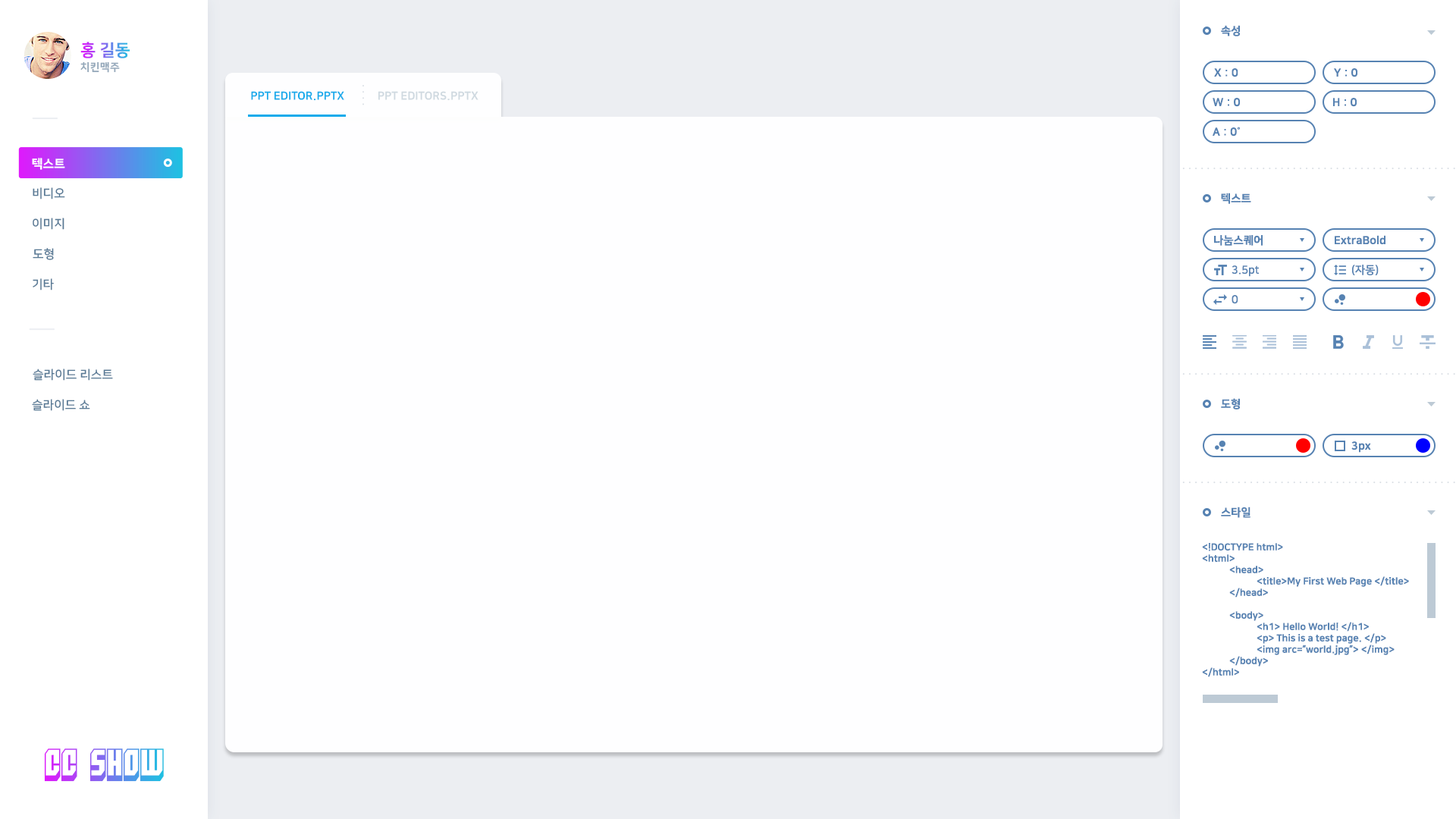
<style>
.page{position:relative;width:1456px;height:819px;background:#fefeff}
.page>*{position:absolute;margin:0}
.t1{font:11.1px "NanumSquareEB";color:#5682b2}
.t2{font:16.7px "NanumSquareEB";text-transform:uppercase}
.t3{font:10.6px "NanumSquareEB";letter-spacing:0.025em;color:#94a8ba;text-transform:uppercase}
.t4{font:11.1px "NanumSquareEB";color:#12aaeb;text-transform:uppercase}
.t5{font:11.1px "NanumSquareEB";color:#cfd9e0;text-transform:uppercase}
.t6{font:12.1px "NanumSquareEB";color:#ffffff;text-transform:uppercase}
.t7{font:12.1px "NanumSquareB";color:#597a96;text-transform:uppercase}
.t8{font:11.1px "NanumSquareB";color:#5682b2}
.t9{font:9.5px "NanumSquareEB";color:#5682b2}
.t10{font:31.6px "Blockt"}
</style>
<div class="page">
<p class="t1" style="left:1221px;top:25px;width:19px;height:11px">속성</p>
<p class="t2" style="left:80px;top:42px;width:50px;height:16px">홍 길동</p>
<p class="t3" style="left:80px;top:61px;width:40px;height:12px">치킨맥주</p>
<p class="t1" style="left:1214px;top:68px;width:24px;height:9px">X : 0</p>
<p class="t1" style="left:1334px;top:68px;width:23px;height:9px">Y : 0</p>
<p class="t4" style="left:251px;top:91px;width:93px;height:10px">PPT editor.pptx</p>
<p class="t5" style="left:378px;top:91px;width:101px;height:10px">PPT EDITORS.PPTX</p>
<p class="t1" style="left:1213px;top:98px;width:27px;height:9px">W : 0</p>
<p class="t1" style="left:1333px;top:98px;width:24px;height:9px">H : 0</p>
<p class="t1" style="left:1213px;top:127px;width:27px;height:9px">A : 0˚</p>
<p class="t6" style="left:32px;top:158px;width:33px;height:12px">텍스트</p>
<p class="t7" style="left:33px;top:187px;width:32px;height:12px">비디오</p>
<p class="t1" style="left:1221px;top:193px;width:30px;height:11px">텍스트</p>
<p class="t7" style="left:33px;top:218px;width:31px;height:12px">이미지</p>
<p class="t1" style="left:1214px;top:235px;width:49px;height:11px">나눔스퀘어</p>
<p class="t1" style="left:1335px;top:235px;width:50px;height:10px">ExtraBold</p>
<p class="t7" style="left:33px;top:248px;width:21px;height:12px">도형</p>
<p class="t8" style="left:1232px;top:265px;width:28px;height:12px">3.5pt</p>
<p class="t8" style="left:1352px;top:265px;width:27px;height:10px">(자동)</p>
<p class="t7" style="left:33px;top:278px;width:21px;height:12px">기타</p>
<p class="t8" style="left:1232px;top:295px;width:6px;height:9px">0</p>
<p class="t7" style="left:33px;top:369px;width:80px;height:12px">슬라이드 리스트</p>
<p class="t7" style="left:32px;top:399px;width:58px;height:12px">슬라이드 쇼</p>
<p class="t1" style="left:1221px;top:398px;width:19px;height:11px">도형</p>
<p class="t1" style="left:1351px;top:441px;width:20px;height:12px">3px</p>
<p class="t1" style="left:1221px;top:507px;width:29px;height:11px">스타일</p>
<p class="t9" style="left:1202px;top:543px;width:207px;height:134px">&lt;!DOCTYPE html&gt;<br>&lt;html&gt;<br> &lt;head&gt;<br>  &lt;title&gt;My First Web Page &lt;/title&gt;<br> &lt;/head&gt;<br><br> &lt;body&gt;<br>  &lt;h1&gt; Hello World! &lt;/h1&gt;<br>  &lt;p&gt; This is a test page. &lt;/p&gt;<br>  &lt;img arc=”world.jpg”&gt; &lt;/img&gt;<br> &lt;/body&gt;<br>&lt;/html&gt;</p>
<p class="t10" style="left:44px;top:748px;width:120px;height:34px">CC SHOW</p>
</div>
